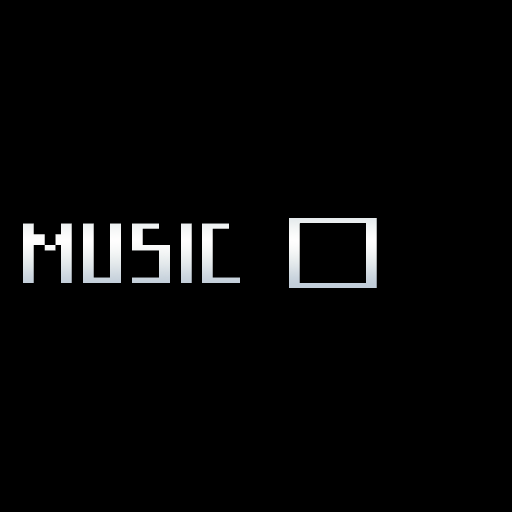
<style>
.page{position:relative;width:512px;height:512px;background:#000000}
.page>*{position:absolute;margin:0}
.t1{font:79.2px "Starcadia";color:#fffefe}
</style>
<div class="page">
<p class="t1" style="left:23px;top:223px;width:217px;height:60px">MUSIC</p>
</div>
